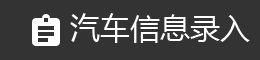
<style>
.page{position:relative;width:260px;height:60px;background:#333333}
.page>*{position:absolute;margin:0}
.t1{font:30px "MicrosoftYaHei";color:#ffffff}
</style>
<div class="page">
<p class="t1" style="left:70px;top:13px;width:180px;height:30px">汽车信息录入</p>
</div>
